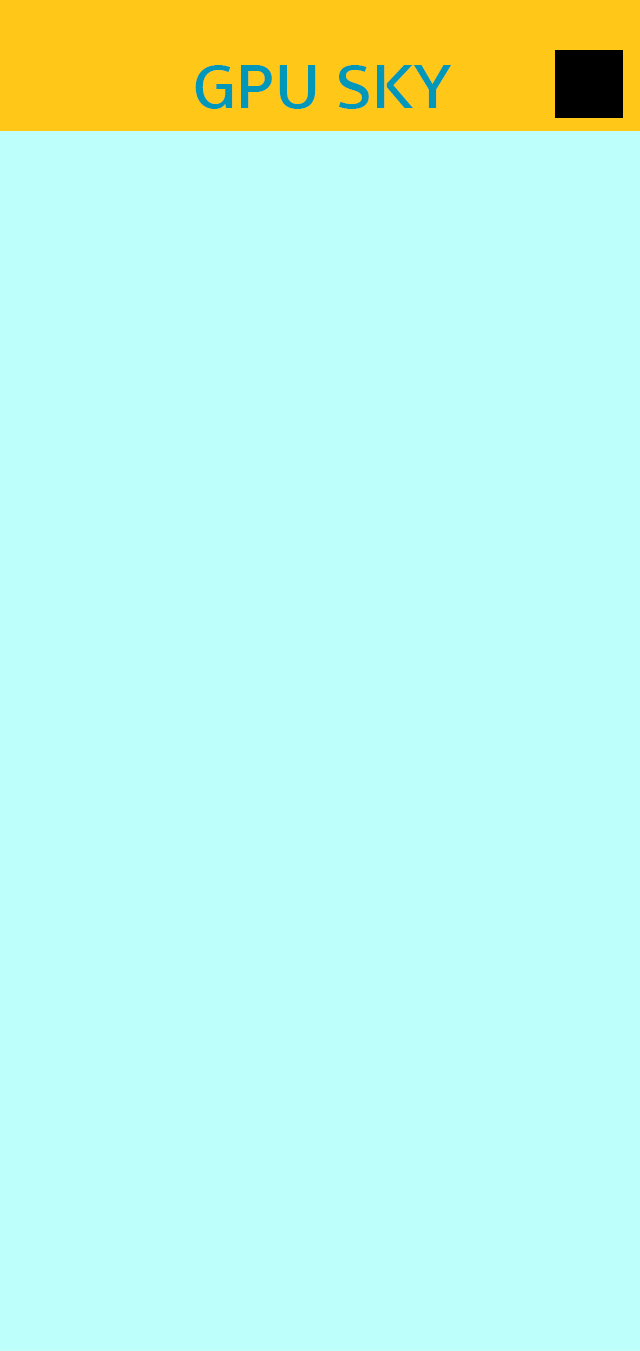
<style>
.page{position:relative;width:640px;height:1351px;background:#bdfffa}
.page>*{position:absolute;margin:0}
.t1{font:63.9px "SukhumvitSet-SemiBold";color:#0097b8;scale:1.05 1}
</style>
<div class="page">
<p class="t1" style="left:195px;top:65px;width:257px;height:44px">GPU SKY</p>
</div>
